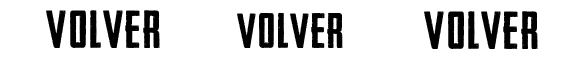
<style>
.page{position:relative;width:579px;height:71px;background:#ffffff}
.page>*{position:absolute;margin:0}
.t1{font:50.5px "HeadlinerNo.45";letter-spacing:0.04em;color:#010101}
.t2{font:47px "HeadlinerNo.45";letter-spacing:0.04em;color:#010101}
</style>
<div class="page">
<p class="t1" style="left:46px;top:10px;width:114px;height:38px">VOLVER</p>
<p class="t2" style="left:237px;top:12px;width:106px;height:36px">VOLVER</p>
<p class="t1" style="left:424px;top:11px;width:114px;height:38px">VOLVER</p>
</div>
